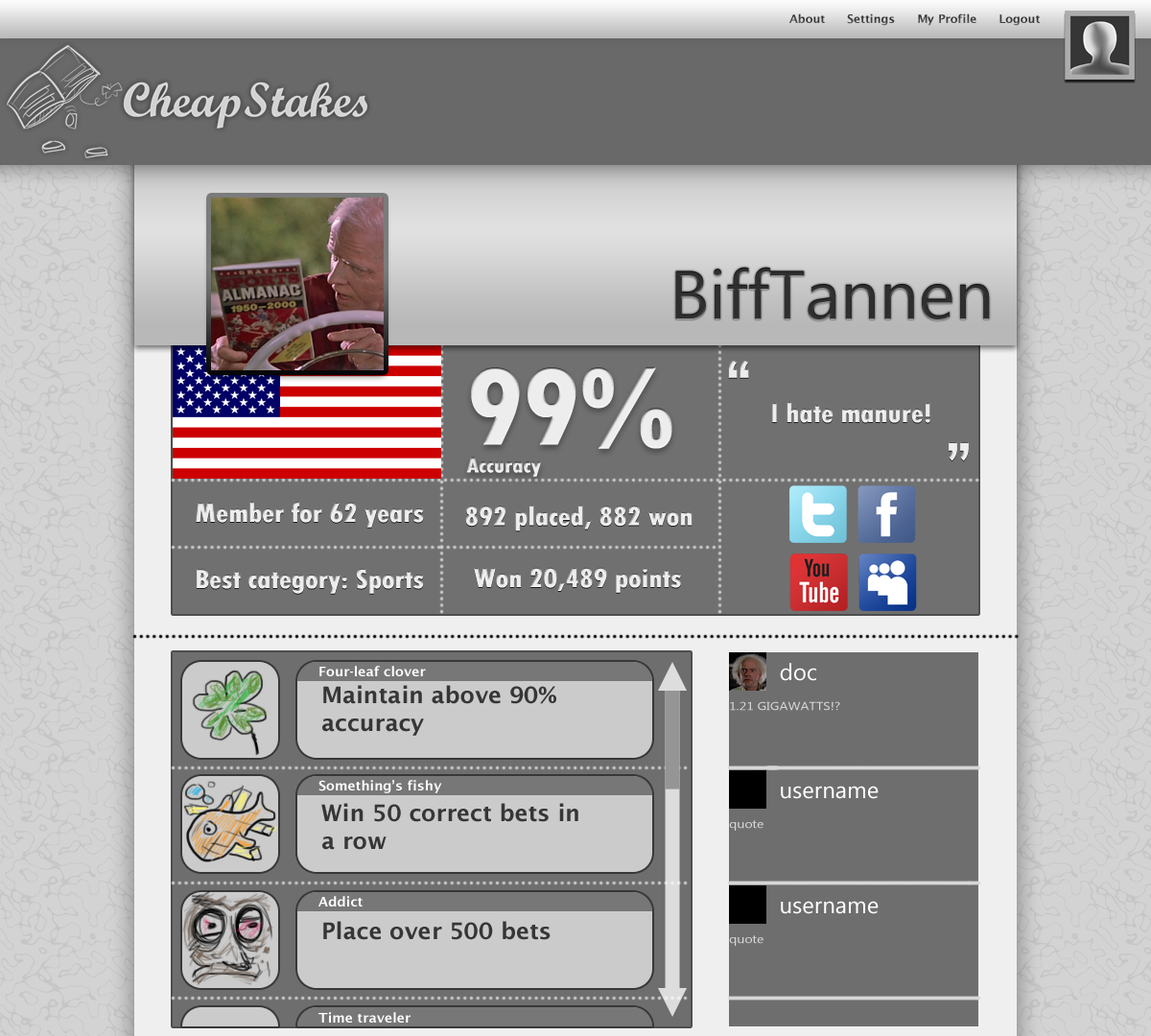
<style>
.page{position:relative;width:1151px;height:1036px}
.page>*{position:absolute;margin:0}
.t1{font:11.5px "LucidaSans-Demi";color:#3c3c3c}
.t2{font:69.1px "SegoeUI";color:#2f2f2f}
.t3{font:69.1px "TwCenMT-CondensedExtraBold";color:#ededed}
.t4{font:23px "TwCenMT-CondensedExtraBold";color:#ededed}
.t5{font:115.1px "TwCenMT-CondensedExtraBold";color:#ededed}
.t6{font:28.8px "TwCenMT-CondensedExtraBold";color:#ededed}
.t7{font:13.4px "LucidaSans-Demi";color:#ffffff}
.t8{font:23px "SegoeUI";color:#ffffff}
.t9{font:23px "LucidaSans-Demi";color:#363636}
.t10{font:11.5px "SegoeUI";color:#d7d7d7;scale:1.17 1}
</style>
<div class="page">
<p class="t1" style="left:789px;top:13px;width:251px;height:13px">About      Settings      My Profile      Logout</p>
<p class="t2" style="left:675px;top:267px;width:315px;height:53px">BiffTannen</p>
<p class="t3" style="left:728px;top:359px;width:241px;height:102px">“<br>             ”</p>
<p class="t4" style="left:466px;top:366px;width:206px;height:111px"><span class="t5">99% <br></span>Accuracy</p>
<p class="t6" style="left:772px;top:402px;width:158px;height:21px">I hate manure!</p>
<p class="t6" style="left:196px;top:502px;width:228px;height:26px">Member for 62 years</p>
<p class="t6" style="left:465px;top:505px;width:228px;height:26px">892 placed, 882 won</p>
<p class="t6" style="left:197px;top:568px;width:227px;height:26px">Best category: Sports</p>
<p class="t6" style="left:474px;top:567px;width:208px;height:26px">Won 20,489 points</p>
<p class="t7" style="left:319px;top:666px;width:107px;height:10px">Four-leaf clover</p>
<p class="t8" style="left:780px;top:663px;width:36px;height:18px">doc</p>
<p class="t9" style="left:322px;top:685px;width:234px;height:51px">Maintain above 90%<br>accuracy</p>
<p class="t10" style="left:730px;top:701px;width:110px;height:10px">1.21 GIGAWATTS!?</p>
<p class="t7" style="left:318px;top:780px;width:124px;height:13px">Something’s fishy</p>
<p class="t8" style="left:781px;top:786px;width:98px;height:13px">username</p>
<p class="t9" style="left:321px;top:803px;width:257px;height:47px">Win 50 correct bets in<br>a row</p>
<p class="t10" style="left:729px;top:820px;width:35px;height:11px">quote</p>
<p class="t7" style="left:318px;top:896px;width:45px;height:10px">Addict</p>
<p class="t8" style="left:781px;top:901px;width:98px;height:13px">username</p>
<p class="t9" style="left:323px;top:921px;width:228px;height:19px">Place over 500 bets</p>
<p class="t10" style="left:729px;top:935px;width:35px;height:11px">quote</p>
<p class="t7" style="left:318px;top:1012px;width:93px;height:11px">Time traveler</p>
</div>
